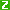
<style>
.page{position:relative;width:10px;height:10px;background:#31af00}
.page>*{position:absolute;margin:0}
.t1{font:9.5px "EASVHS";color:#ffffff;font-weight:bold}
</style>
<div class="page">
<p class="t1" style="left:2px;top:1px;width:6px;height:8px">Z</p>
</div>
